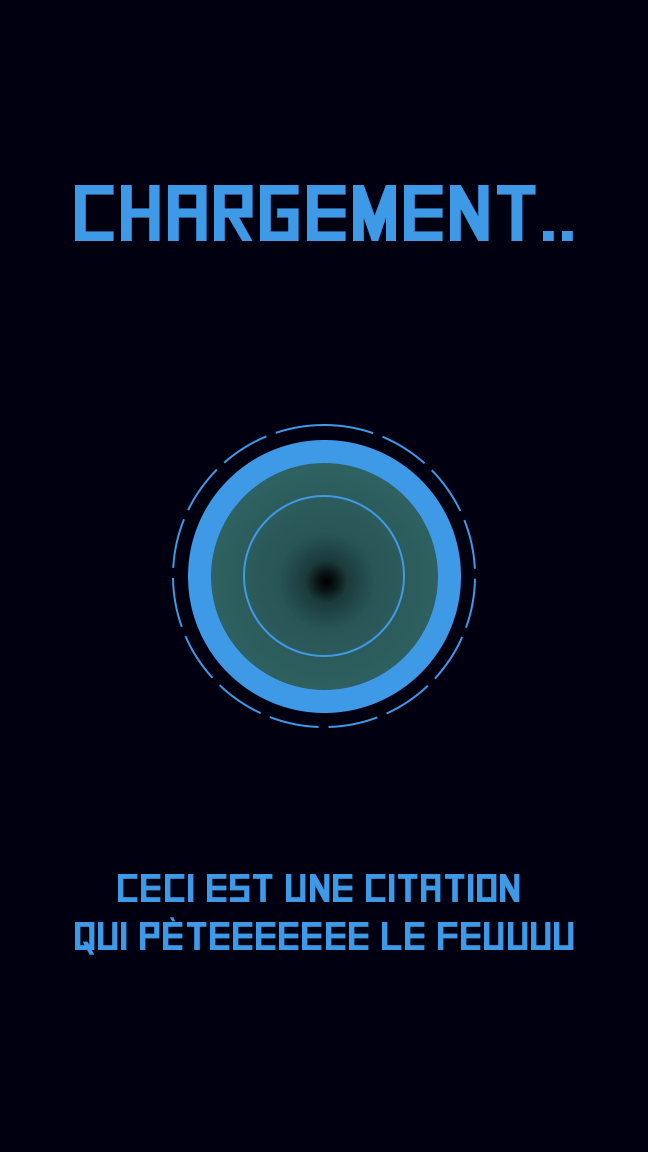
<style>
.page{position:relative;width:648px;height:1152px;background:#000011}
.page>*{position:absolute;margin:0}
.t1{font:80px "SquareFont";color:#3e99e7}
.t2{font:40px "SquareFont";color:#3e99e7}
</style>
<div class="page">
<p class="t1" style="left:75px;top:185px;width:498px;height:56px">Chargement..</p>
<p class="t2" style="left:75px;top:874px;width:499px;height:81px;text-align:center">ceci est une citation <br>qui pèteeeeeee le feuuuu</p>
</div>
